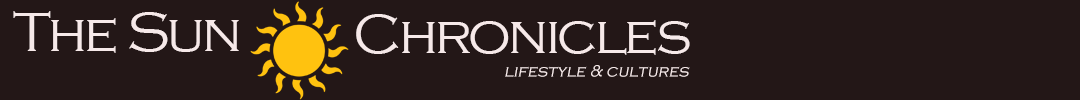
<style>
.page{position:relative;width:1080px;height:100px;background:#231717}
.page>*{position:absolute;margin:0}
.t1{font:57.4px "CopperplateGothic-Light";letter-spacing:-0.05em;color:#f6e9e9}
.t2{font:28.7px "CopperplateGothic-Light";letter-spacing:-0.005em;color:#f6e9e9;font-style:italic}
</style>
<div class="page">
<p class="t1" style="left:13px;top:11px;width:226px;height:42px">The Sun</p>
<p class="t1" style="left:356px;top:14px;width:334px;height:41px">Chronicles</p>
<p class="t2" style="left:505px;top:65px;width:185px;height:12px">lifestyle &amp; cultures</p>
</div>
